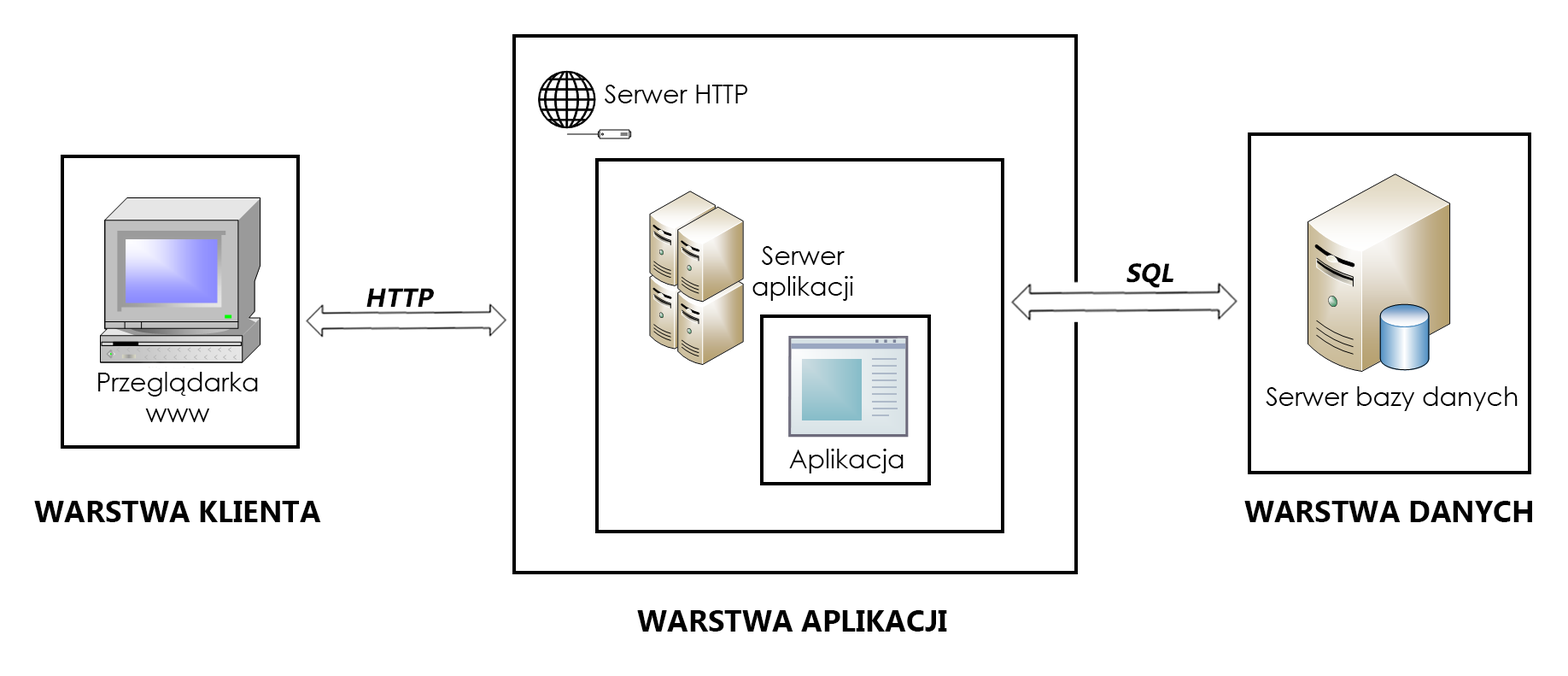
<style>
.page{position:relative;width:1568px;height:676px;background:#ffffff}
.page>*{position:absolute;margin:0}
.t1{font:25.6px "CenturyGothic";color:#000000}
.t2{font:26.3px "MicrosoftNewTaiLue-Bold";color:#000000;font-style:italic}
.t3{font:29.9px "MicrosoftNewTaiLue-Bold";color:#000000}
</style>
<div class="page">
<p class="t1" style="left:605px;top:85px;width:143px;height:18px">Serwer HTTP</p>
<p class="t1" style="left:752px;top:246px;width:101px;height:55px;text-align:center">Serwer <br>aplikacji</p>
<p class="t2" style="left:1126px;top:263px;width:47px;height:25px">SQL</p>
<p class="t2" style="left:366px;top:288px;width:68px;height:19px">HTTP</p>
<p class="t1" style="left:98px;top:372px;width:160px;height:50px;text-align:center">Przeglądarka<br>www</p>
<p class="t1" style="left:1266px;top:386px;width:252px;height:25px">Serwer bazy danych</p>
<p class="t1" style="left:789px;top:448px;width:115px;height:25px">Aplikacja</p>
<p class="t3" style="left:34px;top:500px;width:287px;height:22px">WARSTWA KLIENTA</p>
<p class="t3" style="left:1244px;top:500px;width:288px;height:22px">WARSTWA DANYCH</p>
<p class="t3" style="left:637px;top:610px;width:310px;height:21px">WARSTWA APLIKACJI</p>
</div>
